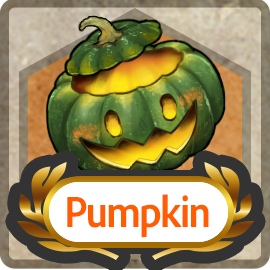
<style>
.page{position:relative;width:270px;height:270px}
.page>*{position:absolute;margin:0}
.t1{font:45px "AdobeClean-Bold";letter-spacing:-0.04em;color:#ff5d00;scale:0.9 1}
</style>
<div class="page">
<p class="t1" style="left:67px;top:194px;width:142px;height:44px">Pumpkin</p>
</div>
